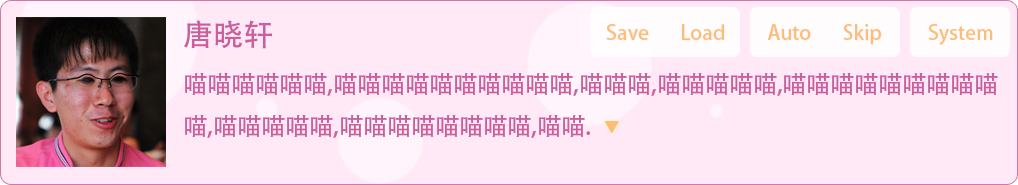
<style>
.page{position:relative;width:1018px;height:185px;background:#ffe9f6}
.page>*{position:absolute;margin:0}
.t1{font:24px "AdobeHeitiStd-Regular";color:#cb5e9b}
.t2{font:30px "AdobeHeitiStd-Regular";color:#cb5e9b}
.t3{font:20px "AdobeHeitiStd-Regular";color:#ffbb78}
</style>
<div class="page">
<p class="t1" style="left:184px;top:20px;width:814px;height:118px"><span class="t2">唐晓轩<br></span>喵喵喵喵喵喵,喵喵喵喵喵喵喵喵喵喵,喵喵喵,喵喵喵喵喵,喵喵喵喵喵喵喵喵喵<br>喵,喵喵喵喵喵,喵喵喵喵喵喵喵喵,喵喵.</p>
<p class="t3" style="left:606px;top:24px;width:118px;height:16px">Save       Load</p>
<p class="t3" style="left:767px;top:24px;width:114px;height:21px">Auto       Skip</p>
<p class="t3" style="left:928px;top:24px;width:65px;height:21px">System</p>
</div>
